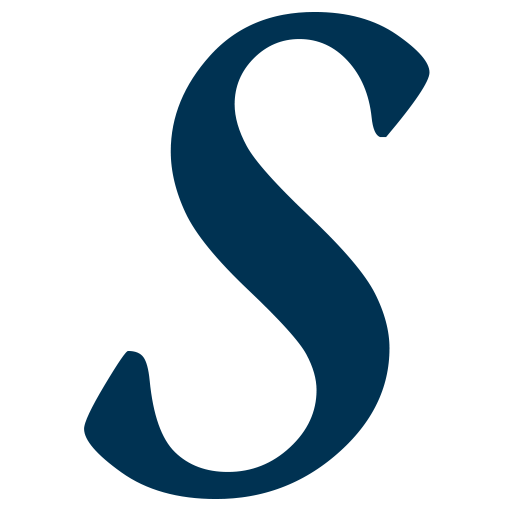
<style>
.page{position:relative;width:512px;height:512px;background:#ffffff}
.page>*{position:absolute;margin:0}
.t1{font:688px "ScriptMTBold";color:#003252}
</style>
<div class="page">
<p class="t1" style="left:84px;top:12px;width:346px;height:487px">S</p>
</div>
